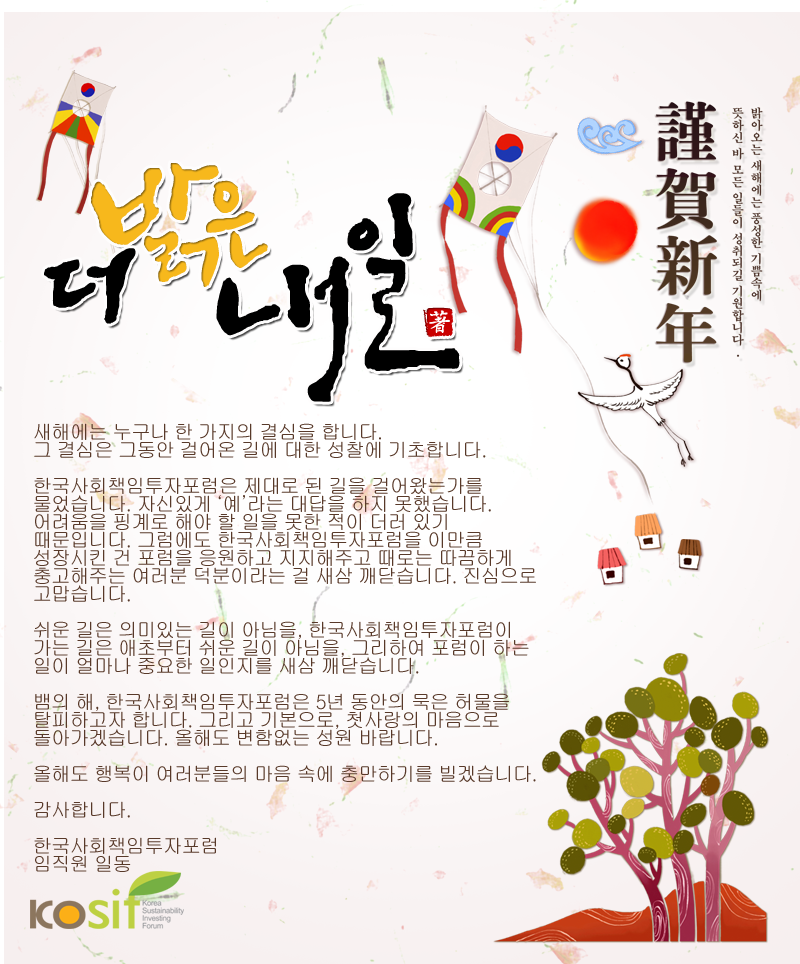
<style>
.page{position:relative;width:800px;height:964px}
.page>*{position:absolute;margin:0}
.t1{font:20px/18px "Gulim";letter-spacing:-0.05em;color:#583929}
</style>
<div class="page">
<p class="t1" style="left:34px;top:423px;width:502px;height:449px">새해에는 누구나 한 가지의 결심을 합니다. <br>그 결심은 그동안 걸어온 길에 대한 성찰에 기초합니다.  <br><br>한국사회책임투자포럼은 제대로 된 길을 걸어왔는가를 물었습니다. 자신있게 ‘예’라는 대답을 하지 못했습니다. 어려움을 핑계로 해야 할 일을 못한 적이 더러 있기 때문입니다. 그럼에도 한국사회책임투자포럼을 이만큼 성장시킨 건 포럼을 응원하고 지지해주고 때로는 따끔하게 충고해주는 여러분 덕분이라는 걸 새삼 깨닫습니다. 진심으로 고맙습니다. <br><br>쉬운 길은 의미있는 길이 아님을, 한국사회책임투자포럼이 가는 길은 애초부터 쉬운 길이 아님을, 그리하여 포럼이 하는 일이 얼마나 중요한 일인지를 새삼 깨닫습니다. <br><br>뱀의 해, 한국사회책임투자포럼은 5년 동안의 묵은 허물을 탈피하고자 합니다. 그리고 기본으로, 첫사랑의 마음으로 돌아가겠습니다. 올해도 변함없는 성원 바랍니다.<br><br>올해도 행복이 여러분들의 마음 속에 충만하기를 빌겠습니다.   <br><br>감사합니다.   <br><br>한국사회책임투자포럼 <br>임직원 일동</p>
</div>
